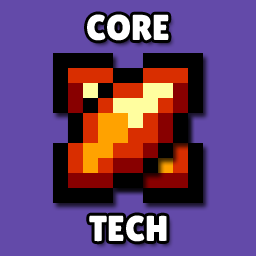
<style>
.page{position:relative;width:256px;height:256px;background:#634aa9}
.page>*{position:absolute;margin:0}
.t1{font:36px "LilitaOne";color:#ffffff}
</style>
<div class="page">
<p class="t1" style="left:87px;top:14px;width:82px;height:27px">CORE</p>
<p class="t1" style="left:89px;top:215px;width:78px;height:27px">TECH</p>
</div>
